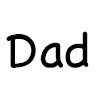
<style>
.page{position:relative;width:100px;height:100px;background:#ffffff}
.page>*{position:absolute;margin:0}
.t1{font:50px "Chalkboard";color:#000000}
</style>
<div class="page">
<p class="t1" style="left:6px;top:31px;width:83px;height:37px">Dad</p>
</div>
